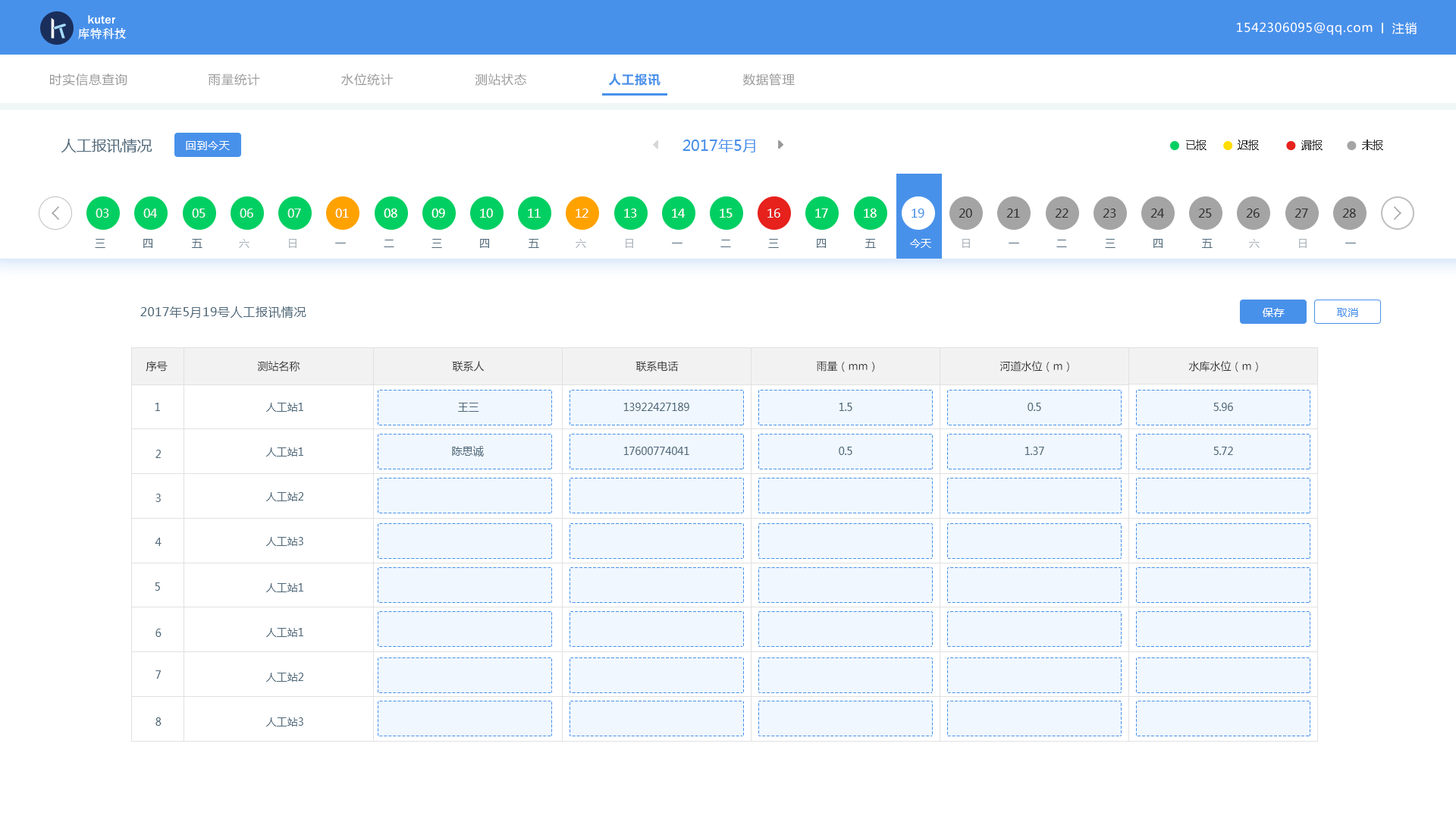
<style>
.page{position:relative;width:1456px;height:819px;background:#ffffff}
.page>*{position:absolute;margin:0}
.t1{font:12.1px "MicrosoftYaHei";letter-spacing:0.05em;color:#ffffff}
.t2{font:12.1px "MicrosoftYaHei";letter-spacing:0.05em;color:#999999}
.t3{font:12.1px "MicrosoftYaHei-Bold";letter-spacing:0.05em;color:#4891ea}
.t4{font:15.2px "MicrosoftYaHei";color:#50697a}
.t5{font:10.6px "MicrosoftYaHei";letter-spacing:0.05em;color:#ffffff}
.t6{font:15.2px "MicrosoftYaHei";color:#4891ea}
.t7{font:10.6px "MicrosoftYaHei";color:#333333}
.t8{font:12.1px "MicrosoftYaHei";color:#eff6f6}
.t9{font:12.1px "MicrosoftYaHei";color:#ffffff}
.t10{font:12.1px "MicrosoftYaHei";color:#4891ea}
.t11{font:12.1px "MicrosoftYaHei";color:#333333}
.t12{font:10.6px "MicrosoftYaHei";color:#50697a}
.t13{font:10.6px "MicrosoftYaHei";color:#a4afb6}
.t14{font:10.6px "MicrosoftYaHei";color:#ffffff}
.t15{font:12.1px "MicrosoftYaHei";letter-spacing:0.05em;color:#50697a}
.t16{font:10.6px "MicrosoftYaHei";letter-spacing:0.05em;color:#4891ea}
</style>
<div class="page">
<p class="t1" style="left:1237px;top:22px;width:136px;height:13px">1542306095@qq.com</p>
<p class="t1" style="left:1392px;top:22px;width:25px;height:12px">注销</p>
<p class="t2" style="left:50px;top:74px;width:77px;height:12px">时实信息查询</p>
<p class="t2" style="left:208px;top:74px;width:52px;height:12px">雨量统计</p>
<p class="t2" style="left:341px;top:74px;width:52px;height:12px">水位统计</p>
<p class="t2" style="left:475px;top:74px;width:52px;height:12px">测站状态</p>
<p class="t3" style="left:608px;top:74px;width:52px;height:12px">人工报讯</p>
<p class="t2" style="left:742px;top:74px;width:53px;height:12px">数据管理</p>
<p class="t4" style="left:61px;top:139px;width:91px;height:13px">人工报讯情况</p>
<p class="t5" style="left:186px;top:141px;width:44px;height:9px">回到今天</p>
<p class="t6" style="left:682px;top:139px;width:73px;height:13px">2017年5月</p>
<p class="t7" style="left:1186px;top:140px;width:20px;height:10px">已报</p>
<p class="t7" style="left:1238px;top:140px;width:21px;height:10px">迟报</p>
<p class="t7" style="left:1301px;top:140px;width:22px;height:10px">漏报</p>
<p class="t7" style="left:1362px;top:140px;width:21px;height:10px">未报</p>
<p class="t8" style="left:96px;top:209px;width:13px;height:9px">03</p>
<p class="t8" style="left:143px;top:209px;width:14px;height:9px">04</p>
<p class="t8" style="left:192px;top:209px;width:14px;height:9px">05</p>
<p class="t8" style="left:240px;top:209px;width:13px;height:9px">06</p>
<p class="t8" style="left:287px;top:209px;width:14px;height:9px">07</p>
<p class="t9" style="left:335px;top:209px;width:14px;height:9px">01</p>
<p class="t9" style="left:384px;top:209px;width:13px;height:9px">08</p>
<p class="t9" style="left:431px;top:209px;width:14px;height:9px">09</p>
<p class="t9" style="left:480px;top:209px;width:13px;height:9px">10</p>
<p class="t9" style="left:528px;top:209px;width:13px;height:9px">11</p>
<p class="t9" style="left:576px;top:209px;width:12px;height:9px">12</p>
<p class="t9" style="left:624px;top:209px;width:13px;height:9px">13</p>
<p class="t9" style="left:672px;top:209px;width:13px;height:9px">14</p>
<p class="t9" style="left:720px;top:209px;width:13px;height:9px">15</p>
<p class="t8" style="left:767px;top:209px;width:13px;height:9px">16</p>
<p class="t9" style="left:815px;top:209px;width:13px;height:9px">17</p>
<p class="t9" style="left:864px;top:209px;width:13px;height:9px">18</p>
<p class="t10" style="left:912px;top:209px;width:12px;height:9px">19</p>
<p class="t11" style="left:959px;top:209px;width:13px;height:9px">20</p>
<p class="t11" style="left:1006px;top:209px;width:14px;height:9px">21</p>
<p class="t11" style="left:1055px;top:209px;width:13px;height:9px">22</p>
<p class="t11" style="left:1103px;top:209px;width:13px;height:9px">23</p>
<p class="t11" style="left:1150px;top:209px;width:14px;height:9px">24</p>
<p class="t11" style="left:1198px;top:209px;width:14px;height:9px">25</p>
<p class="t11" style="left:1246px;top:209px;width:14px;height:9px">26</p>
<p class="t11" style="left:1294px;top:209px;width:14px;height:9px">27</p>
<p class="t11" style="left:1342px;top:209px;width:14px;height:9px">28</p>
<p class="t12" style="left:95px;top:239px;width:10px;height:9px">三</p>
<p class="t12" style="left:143px;top:239px;width:9px;height:9px">四</p>
<p class="t12" style="left:192px;top:239px;width:10px;height:9px">五</p>
<p class="t13" style="left:239px;top:239px;width:10px;height:9px">六</p>
<p class="t13" style="left:289px;top:239px;width:8px;height:9px">日</p>
<p class="t12" style="left:335px;top:243px;width:11px;height:0px">一</p>
<p class="t12" style="left:384px;top:240px;width:10px;height:7px">二</p>
<p class="t12" style="left:431px;top:239px;width:11px;height:9px">三</p>
<p class="t12" style="left:480px;top:239px;width:9px;height:9px">四</p>
<p class="t12" style="left:529px;top:239px;width:10px;height:9px">五</p>
<p class="t13" style="left:576px;top:239px;width:10px;height:9px">六</p>
<p class="t13" style="left:626px;top:239px;width:7px;height:9px">日</p>
<p class="t12" style="left:672px;top:243px;width:10px;height:0px">一</p>
<p class="t12" style="left:720px;top:240px;width:11px;height:7px">二</p>
<p class="t12" style="left:768px;top:239px;width:11px;height:9px">三</p>
<p class="t12" style="left:817px;top:239px;width:9px;height:9px">四</p>
<p class="t12" style="left:865px;top:239px;width:11px;height:9px">五</p>
<p class="t14" style="left:910px;top:239px;width:21px;height:9px">今天</p>
<p class="t13" style="left:962px;top:239px;width:8px;height:9px">日</p>
<p class="t12" style="left:1009px;top:243px;width:10px;height:0px">一</p>
<p class="t12" style="left:1056px;top:240px;width:11px;height:7px">二</p>
<p class="t12" style="left:1105px;top:239px;width:10px;height:9px">三</p>
<p class="t12" style="left:1153px;top:239px;width:10px;height:9px">四</p>
<p class="t12" style="left:1202px;top:239px;width:11px;height:9px">五</p>
<p class="t13" style="left:1249px;top:239px;width:11px;height:9px">六</p>
<p class="t13" style="left:1299px;top:239px;width:8px;height:9px">日</p>
<p class="t12" style="left:1345px;top:243px;width:11px;height:0px">一</p>
<p class="t15" style="left:140px;top:306px;width:166px;height:12px">2017年5月19号人工报讯情况</p>
<p class="t5" style="left:1263px;top:308px;width:22px;height:9px">保存</p>
<p class="t16" style="left:1337px;top:308px;width:21px;height:9px">取消</p>
<p class="t7" style="left:146px;top:361px;width:22px;height:11px">序号</p>
<p class="t7" style="left:257px;top:361px;width:43px;height:11px">测站名称</p>
<p class="t7" style="left:452px;top:361px;width:33px;height:11px">联系人</p>
<p class="t7" style="left:635px;top:361px;width:44px;height:11px">联系电话</p>
<p class="t7" style="left:817px;top:361px;width:57px;height:11px">雨量（mm）</p>
<p class="t7" style="left:999px;top:361px;width:70px;height:11px">河道水位（m）</p>
<p class="t7" style="left:1188px;top:361px;width:70px;height:11px">水库水位（m）</p>
<p class="t12" style="left:155px;top:403px;width:5px;height:8px">1</p>
<p class="t12" style="left:266px;top:403px;width:37px;height:9px">人工站1</p>
<p class="t12" style="left:458px;top:403px;width:21px;height:9px">王三</p>
<p class="t12" style="left:623px;top:403px;width:66px;height:8px">13922427189</p>
<p class="t12" style="left:839px;top:403px;width:13px;height:8px">1.5</p>
<p class="t12" style="left:1028px;top:403px;width:13px;height:8px">0.5</p>
<p class="t12" style="left:1213px;top:403px;width:20px;height:8px">5.96</p>
<p class="t12" style="left:155px;top:450px;width:6px;height:8px">2</p>
<p class="t12" style="left:266px;top:447px;width:37px;height:10px">人工站1</p>
<p class="t12" style="left:452px;top:446px;width:32px;height:11px">陈思诚</p>
<p class="t12" style="left:623px;top:447px;width:66px;height:8px">17600774041</p>
<p class="t12" style="left:839px;top:447px;width:13px;height:8px">0.5</p>
<p class="t12" style="left:1024px;top:447px;width:20px;height:8px">1.37</p>
<p class="t12" style="left:1213px;top:447px;width:20px;height:8px">5.72</p>
<p class="t12" style="left:155px;top:494px;width:6px;height:8px">3</p>
<p class="t12" style="left:266px;top:492px;width:37px;height:9px">人工站2</p>
<p class="t12" style="left:155px;top:538px;width:7px;height:8px">4</p>
<p class="t12" style="left:266px;top:537px;width:37px;height:9px">人工站3</p>
<p class="t12" style="left:155px;top:582px;width:5px;height:9px">5</p>
<p class="t12" style="left:266px;top:583px;width:37px;height:9px">人工站1</p>
<p class="t12" style="left:155px;top:629px;width:7px;height:8px">6</p>
<p class="t12" style="left:266px;top:628px;width:37px;height:9px">人工站1</p>
<p class="t12" style="left:155px;top:670px;width:6px;height:9px">7</p>
<p class="t12" style="left:266px;top:673px;width:37px;height:9px">人工站2</p>
<p class="t12" style="left:155px;top:717px;width:7px;height:9px">8</p>
<p class="t12" style="left:266px;top:717px;width:37px;height:9px">人工站3</p>
</div>
